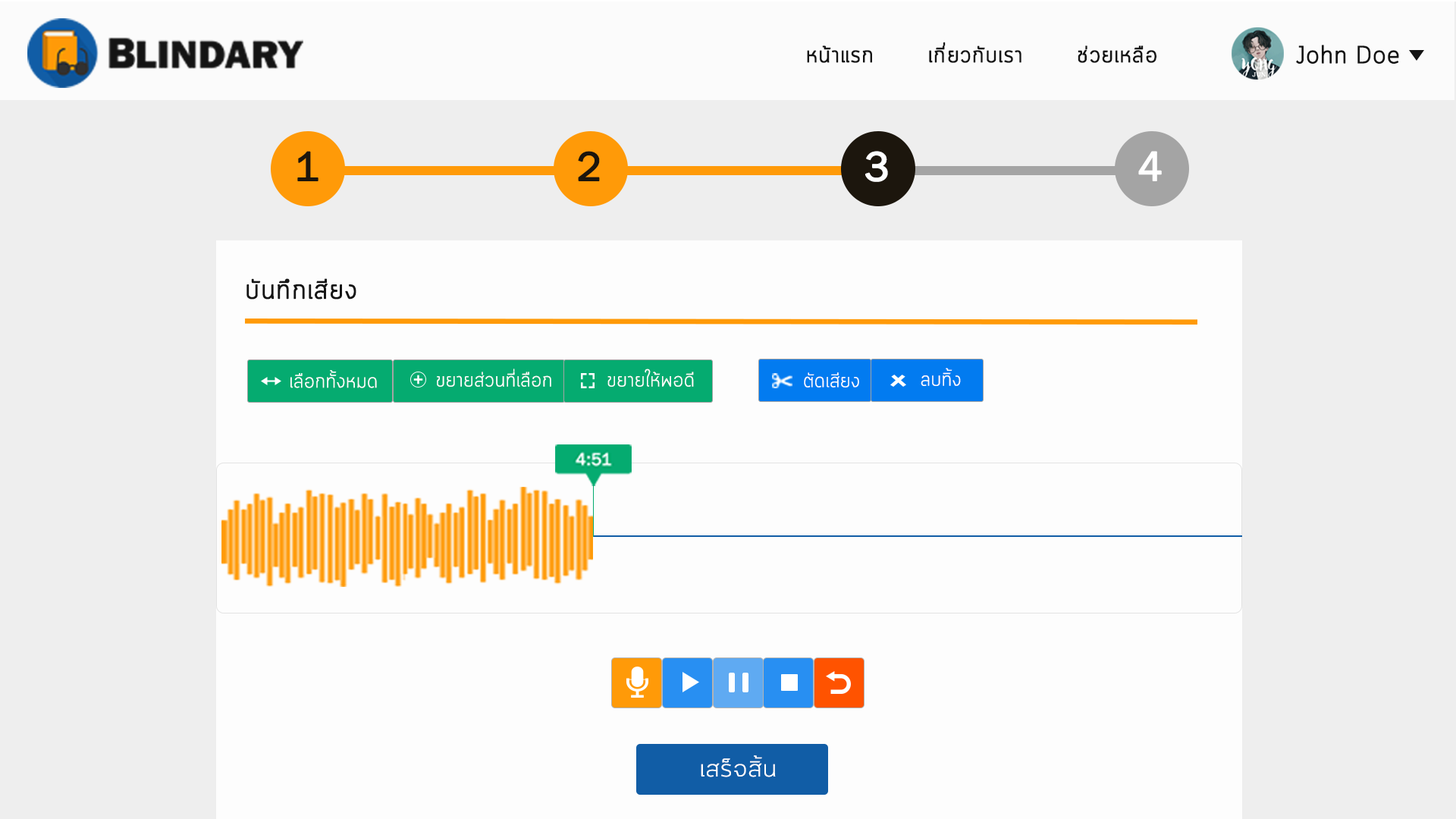
<style>
.page{position:relative;width:1456px;height:819px;background:#fdfdfd}
.page>*{position:absolute;margin:0}
.t1{font:22.7px "Cloud-Light";color:#141414;font-weight:bold}
.t2{font:24.2px "Cloud-Light";color:#141414;font-weight:bold}
.t3{font:42.1px "FranklinGothic-Book";color:#1c160d;font-weight:bold}
.t4{font:42.1px "FranklinGothic-Book";color:#ffffff;font-weight:bold}
.t5{font:27.3px "Cloud-Light";color:#141414;font-weight:bold}
.t6{font:20.3px "Cloud-Light";color:#ffffff}
.t7{font:24.4px "Cloud-Light";color:#ffffff;scale:1.15 1}
</style>
<div class="page">
<p class="t1" style="left:807px;top:42px;width:349px;height:21px">หน้าแรก       เกี่ยวกับเรา       ช่วยเหลือ</p>
<p class="t2" style="left:1296px;top:45px;width:103px;height:19px">John Doe</p>
<p class="t3" style="left:297px;top:151px;width:21px;height:30px">1</p>
<p class="t3" style="left:578px;top:151px;width:22px;height:30px">2</p>
<p class="t4" style="left:865px;top:151px;width:23px;height:31px">3</p>
<p class="t4" style="left:1138px;top:151px;width:24px;height:30px">4</p>
<p class="t5" style="left:246px;top:278px;width:110px;height:22px">บันทึกเสียง</p>
<p class="t6" style="left:290px;top:370px;width:87px;height:18px">เลือกทั้งหมด</p>
<p class="t6" style="left:437px;top:369px;width:114px;height:18px">ขยายส่วนที่เลือก</p>
<p class="t6" style="left:607px;top:369px;width:87px;height:18px">ขยายให้พอดี</p>
<p class="t6" style="left:804px;top:372px;width:55px;height:16px">ตัดเสียง</p>
<p class="t6" style="left:921px;top:368px;width:40px;height:18px">ลบทิ้ง</p>
<p class="t7" style="left:701px;top:755px;width:75px;height:22px">เสร็จสิ้น</p>
</div>
